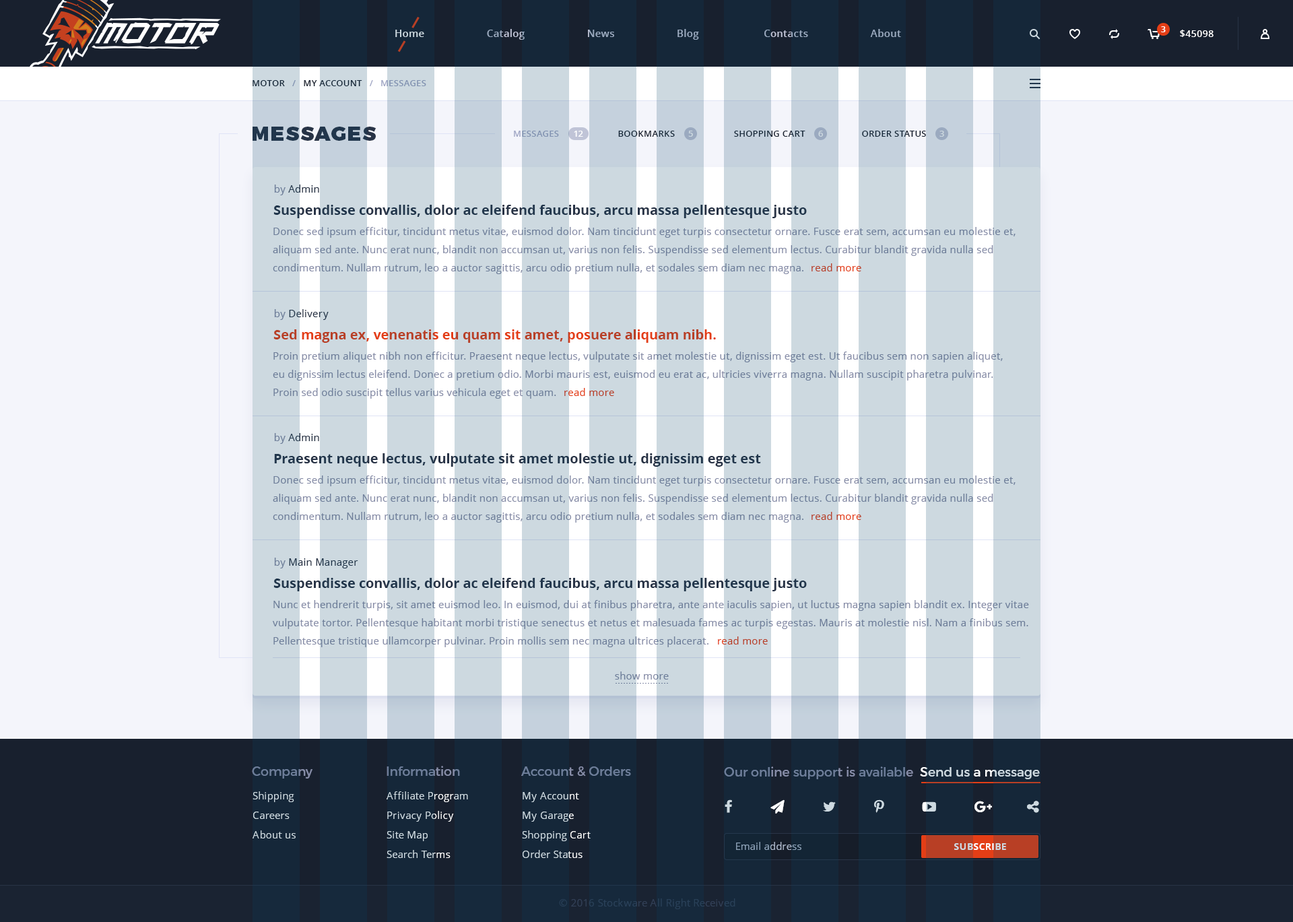
<style>
.page{position:relative;width:1293px;height:922px;background:#f4f5fb}
.page>*{position:absolute;margin:0}
.t1{font:10.1px "OpenSans-Semibold";letter-spacing:0.02em}
.t2{font:8.1px "OpenSans-Bold";color:#ffffff}
.t3{font:9.4px "OpenSans-Semibold";letter-spacing:0.02em;color:#ffffff;text-transform:uppercase}
.t4{font:8.8px "OpenSans-Semibold";letter-spacing:0.02em;text-transform:uppercase}
.t5{font:20.2px "Montserrat-Black";letter-spacing:0.06em;color:#283346;text-transform:uppercase}
.t6{font:8.8px "OpenSans-Semibold";letter-spacing:0.02em;color:#18202e;text-transform:uppercase}
.t7{font:8.8px "OpenSans-Semibold";letter-spacing:0.02em;color:#a0a6c5;text-transform:uppercase}
.t8{font:8.8px "OpenSans-Semibold";letter-spacing:0.02em;color:#ffffff;text-transform:uppercase}
.t9{font:8.8px "OpenSans-Semibold";letter-spacing:0.02em;color:#cdd9e0;text-transform:uppercase}
.t10{font:10.1px "OpenSans";letter-spacing:0.02em;color:#283346}
.t11{font:10.1px "OpenSans";letter-spacing:0.02em;color:#868ca7}
.t12{font:13.5px "OpenSans-Bold";color:#283346}
.t13{font:10.1px/18.2px "OpenSans";letter-spacing:0.02em;color:#6d7d99}
.t14{font:10.1px "OpenSans";letter-spacing:0.02em}
.t15{font:13.5px "OpenSans-Bold";color:#b83f25}
.t16{font:10.1px "OpenSans";letter-spacing:0.02em;color:#b83f25}
.t17{font:10.1px "OpenSans";letter-spacing:0.02em;color:#6d7d99}
.t18{font:12.8px "Montserrat-Regular";color:#6d7d99}
.t19{font:12.8px "Montserrat-Regular"}
.t20{font:10.1px/19.5px "OpenSans";letter-spacing:0.02em;color:#cdd9e0}
.t21{font:9.4px "OpenSans-Bold";letter-spacing:0.02em}
.t22{font:10.1px "OpenSans";letter-spacing:0.02em;color:#324057}
</style>
<div class="page">
<p class="t1" style="left:395px;top:29px;width:506px;height:11px">Home                      Catalog                      News                      Blog                       Contacts                      About</p>
<p class="t2" style="left:1161px;top:26px;width:5px;height:6px">3</p>
<p class="t3" style="left:1180px;top:30px;width:34px;height:7px">$45098</p>
<p class="t4" style="left:253px;top:80px;width:173px;height:6px">Motor   /   My Account   /   Messages</p>
<p class="t5" style="left:253px;top:127px;width:124px;height:14px">messages</p>
<p class="t6" style="left:514px;top:131px;width:412px;height:6px"><span class="t7">Messages                        </span>Bookmarks                        Shopping Cart                       Order Status</p>
<p class="t8" style="left:574px;top:131px;width:9px;height:6px">12</p>
<p class="t9" style="left:688px;top:131px;width:5px;height:6px">5</p>
<p class="t9" style="left:818px;top:131px;width:5px;height:6px">6</p>
<p class="t9" style="left:940px;top:131px;width:4px;height:6px">3</p>
<p class="t10" style="left:274px;top:185px;width:45px;height:10px"><span class="t11">by </span>Admin</p>
<p class="t12" style="left:273px;top:205px;width:534px;height:13px">Suspendisse convallis, dolor ac eleifend faucibus, arcu massa pellentesque justo</p>
<p class="t13" style="left:273px;top:227px;width:743px;height:47px;text-align:justify">Donec sed ipsum efficitur, tincidunt metus vitae, euismod dolor. Nam tincidunt eget turpis consectetur ornare. Fusce erat sem, accumsan eu molestie et, <br>aliquam sed ante. Nunc erat nunc, blandit non accumsan ut, varius non felis. Suspendisse sed elementum lectus. Curabitur blandit gravida nulla sed <br>condimentum. Nullam rutrum, leo a auctor sagittis, arcu odio pretium nulla, et sodales sem diam nec magna.</p>
<p class="t14" style="left:812px;top:263px;width:49px;height:8px">read more</p>
<p class="t10" style="left:274px;top:309px;width:55px;height:11px"><span class="t11">by </span>Delivery</p>
<p class="t15" style="left:273px;top:329px;width:443px;height:14px">Sed magna ex, venenatis eu quam sit amet, posuere aliquam nibh.</p>
<p class="t13" style="left:273px;top:352px;width:730px;height:47px;text-align:justify">Proin pretium aliquet nibh non efficitur. Praesent neque lectus, vulputate sit amet molestie ut, dignissim eget est. Ut faucibus sem non sapien aliquet, <br>eu dignissim lectus eleifend. Donec a pretium odio. Morbi mauris est, euismod eu erat ac, ultricies viverra magna. Nullam suscipit pharetra pulvinar. <br>Proin sed odio suscipit tellus varius vehicula eget et quam.</p>
<p class="t14" style="left:564px;top:388px;width:50px;height:8px">read more</p>
<p class="t10" style="left:274px;top:433px;width:45px;height:11px"><span class="t11">by </span>Admin</p>
<p class="t12" style="left:274px;top:453px;width:487px;height:14px">Praesent neque lectus, vulputate sit amet molestie ut, dignissim eget est</p>
<p class="t13" style="left:273px;top:476px;width:743px;height:47px;text-align:justify">Donec sed ipsum efficitur, tincidunt metus vitae, euismod dolor. Nam tincidunt eget turpis consectetur ornare. Fusce erat sem, accumsan eu molestie et, <br>aliquam sed ante. Nunc erat nunc, blandit non accumsan ut, varius non felis. Suspendisse sed elementum lectus. Curabitur blandit gravida nulla sed <br>condimentum. Nullam rutrum, leo a auctor sagittis, arcu odio pretium nulla, et sodales sem diam nec magna.</p>
<p class="t14" style="left:812px;top:512px;width:49px;height:8px">read more</p>
<p class="t10" style="left:274px;top:558px;width:84px;height:10px"><span class="t11">by </span>Main Manager</p>
<p class="t12" style="left:273px;top:578px;width:534px;height:13px">Suspendisse convallis, dolor ac eleifend faucibus, arcu massa pellentesque justo</p>
<p class="t13" style="left:273px;top:600px;width:756px;height:47px;text-align:justify">Nunc et hendrerit turpis, sit amet euismod leo. In euismod, dui at finibus pharetra, ante ante iaculis sapien, ut luctus magna sapien blandit ex. Integer vitae <br>vulputate tortor. Pellentesque habitant morbi tristique senectus et netus et malesuada fames ac turpis egestas. Mauris at molestie nisl. Nam a finibus sem. <br>Pellentesque tristique ullamcorper pulvinar. Proin mollis sem nec magna ultrices placerat.</p>
<p class="t16" style="left:718px;top:636px;width:50px;height:9px">read more</p>
<p class="t17" style="left:615px;top:672px;width:54px;height:8px">show more</p>
<p class="t18" style="left:252px;top:766px;width:61px;height:13px">Company</p>
<p class="t18" style="left:387px;top:766px;width:73px;height:10px">Information</p>
<p class="t18" style="left:521px;top:766px;width:110px;height:11px">Account &amp; Orders</p>
<p class="t19" style="left:724px;top:766px;width:316px;height:13px">Our online support is available  Send us a message</p>
<p class="t20" style="left:253px;top:791px;width:43px;height:48px">Shipping<br>Careers<br>About us</p>
<p class="t20" style="left:387px;top:791px;width:81px;height:67px">Affiliate Program<br>Privacy Policy<br>Site Map<br>Search Terms</p>
<p class="t20" style="left:522px;top:792px;width:69px;height:66px">My Account<br>My Garage<br>Shopping Cart<br>Order Status</p>
<p class="t14" style="left:736px;top:842px;width:66px;height:8px">Email address</p>
<p class="t21" style="left:954px;top:843px;width:52px;height:7px">SUBSCRIBE</p>
<p class="t22" style="left:559px;top:899px;width:177px;height:10px">© 2016 Stockware All Right Received</p>
</div>
